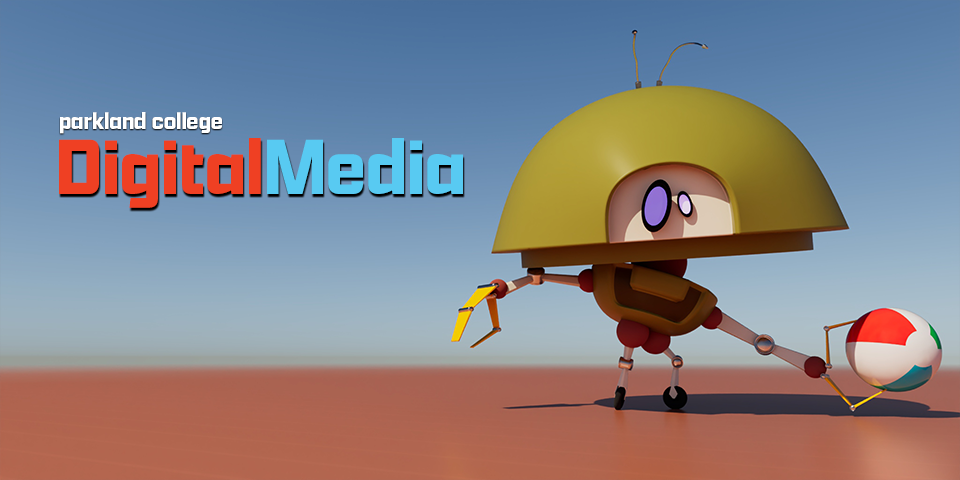
<style>
.page{position:relative;width:960px;height:480px}
.page>*{position:absolute;margin:0}
.t1{font:25.1px "Apotek-Bold";color:#ffffff}
.t2{font:83.7px "Apotek-Bold";color:#ef4023}
.t3{font:83.7px "Apotek-Bold";color:#58caf2}
</style>
<div class="page">
<p class="t1" style="left:60px;top:112px;width:162px;height:22px">parkland college</p>
<p class="t2" style="left:59px;top:138px;width:404px;height:70px">Digital<span class="t3">Media</span></p>
</div>
